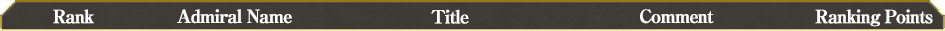
<style>
.page{position:relative;width:945px;height:31px}
.page>*{position:absolute;margin:0}
.t1{font:18px "RyuminPro-ExBold";letter-spacing:-0.08em;color:#ffffff;font-weight:bold}
</style>
<div class="page">
<p class="t1" style="left:53px;top:9px;width:41px;height:15px">Rank</p>
<p class="t1" style="left:177px;top:9px;width:115px;height:15px">Admiral Name</p>
<p class="t1" style="left:431px;top:9px;width:38px;height:15px">Title</p>
<p class="t1" style="left:640px;top:9px;width:74px;height:15px">Comment</p>
<p class="t1" style="left:815px;top:9px;width:118px;height:18px">Ranking Points</p>
</div>
